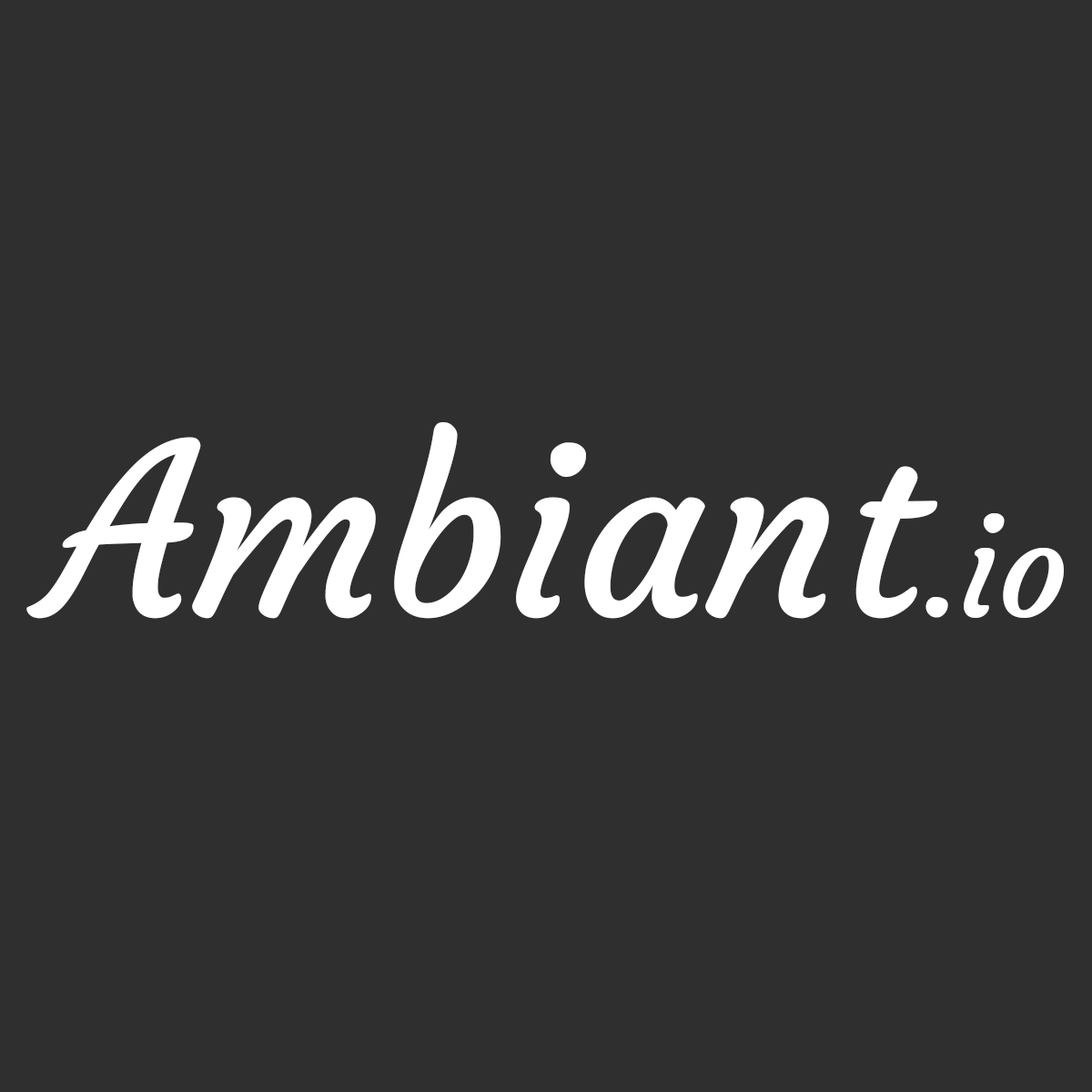
<style>
.page{position:relative;width:1092px;height:1092px;background:#2f2f2f}
.page>*{position:absolute;margin:0}
.t1{font:236.6px "Courgette-Regular";color:#ffffff}
.t2{font:136.5px "Courgette-Regular";color:#ffffff}
</style>
<div class="page">
<p class="t1" style="left:26px;top:421px;width:1038px;height:198px">Ambiant<span class="t2">.io</span></p>
</div>
